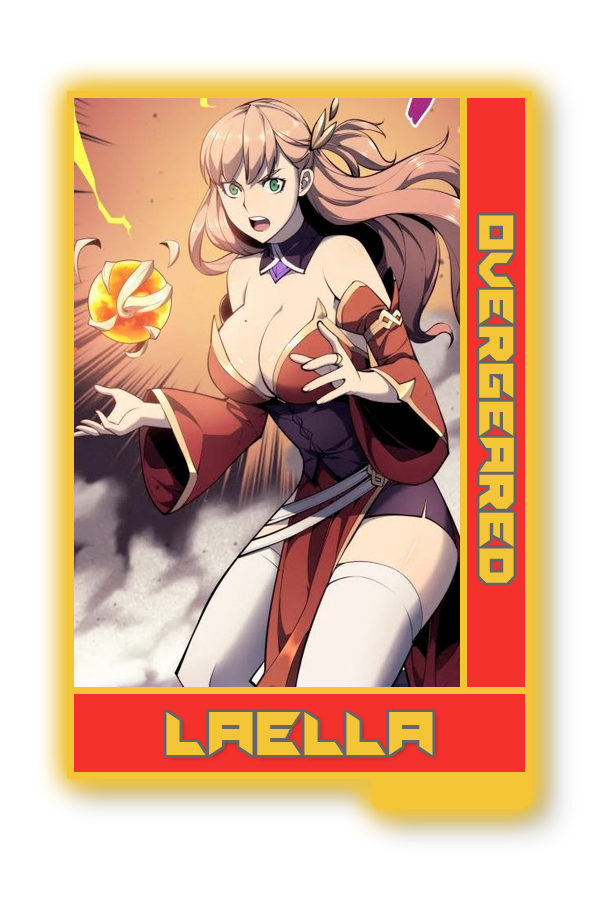
<style>
.page{position:relative;width:600px;height:900px;background:#ffffff}
.page>*{position:absolute;margin:0}
.t1{font:48.8px "Suggested-Regular";color:#f4c536}
.t2{font:62.5px "Suggested-Regular";color:#f4c536}
</style>
<div class="page">
<p class="t1" style="left:479px;top:215px;width:35px;height:368px;rotate:90deg">OVERGEARED</p>
<p class="t2" style="left:166px;top:712px;width:267px;height:43px">Laella</p>
</div>
